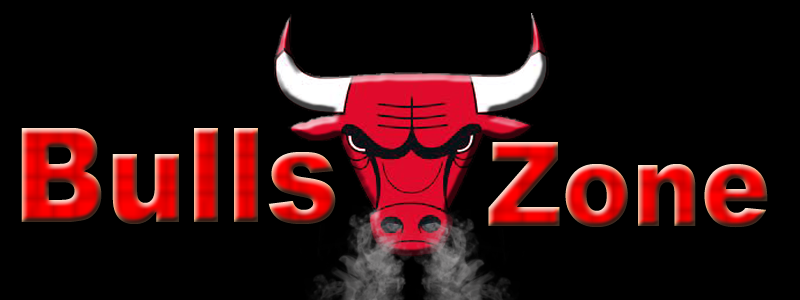
<style>
.page{position:relative;width:800px;height:300px;background:#000000}
.page>*{position:absolute;margin:0}
.t1{font:131.9px "Arial-Black";scale:0.91 1}
.t2{font:116.9px "Arial-Black";scale:0.89 1}
</style>
<div class="page">
<p class="t1" style="left:21px;top:128px;width:315px;height:96px">Bulls</p>
<p class="t2" style="left:488px;top:142px;width:280px;height:86px">Zone</p>
</div>
